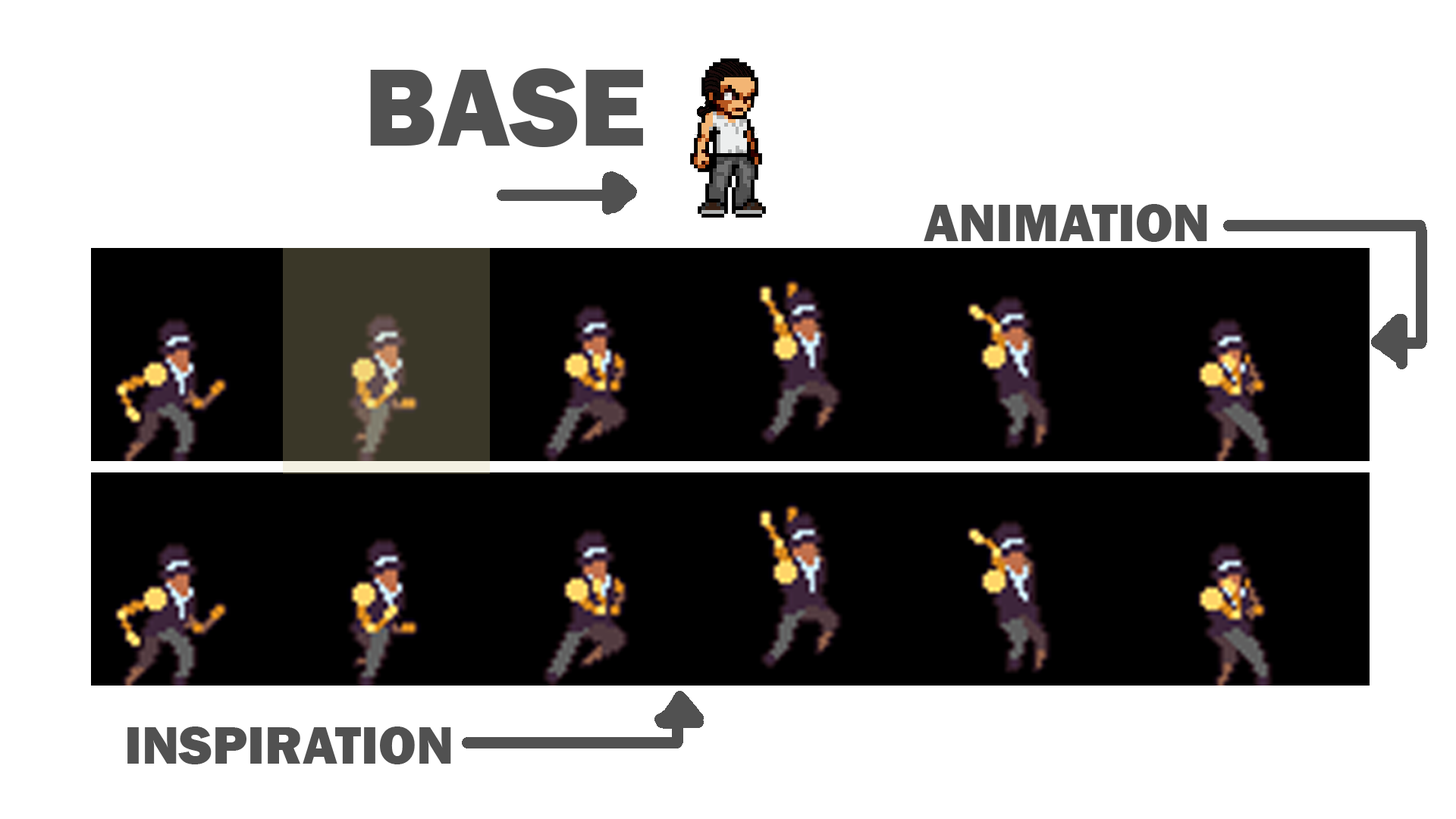
<style>
.page{position:relative;width:1456px;height:819px;background:#ffffff}
.page>*{position:absolute;margin:0}
.t1{font:54.6px "FranklinGothic-Heavy";color:#515151}
.t2{font:113.7px "FranklinGothic-Heavy";color:#515151}
</style>
<div class="page">
<p class="t1" style="left:370px;top:68px;width:273px;height:140px"><span class="t2">BASE<br></span>     -------&gt;</p>
<p class="t1" style="left:924px;top:204px;width:283px;height:38px">ANIMATION</p>
<p class="t1" style="left:127px;top:726px;width:324px;height:38px">INSPIRATION</p>
</div>
